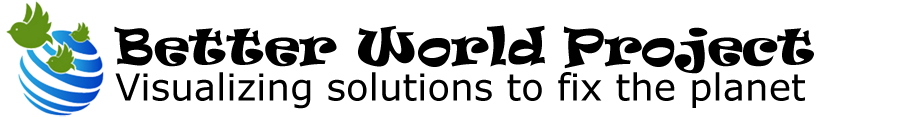
<style>
.page{position:relative;width:907px;height:117px;background:#ffffff}
.page>*{position:absolute;margin:0}
.t1{font:48px "Ravie";color:#000000}
.t2{font:37.3px "Verdana";color:#000000}
</style>
<div class="page">
<p class="t1" style="left:114px;top:25px;width:700px;height:49px">Better World Project</p>
<p class="t2" style="left:115px;top:72px;width:690px;height:37px">Visualizing solutions to fix the planet</p>
</div>
